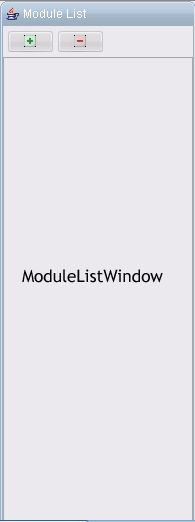
<style>
.page{position:relative;width:195px;height:522px;background:#ebe9ed}
.page>*{position:absolute;margin:0}
.t1{font:17px "TrebuchetMS";color:#000000}
</style>
<div class="page">
<p class="t1" style="left:22px;top:269px;width:141px;height:14px">ModuleListWindow</p>
</div>
